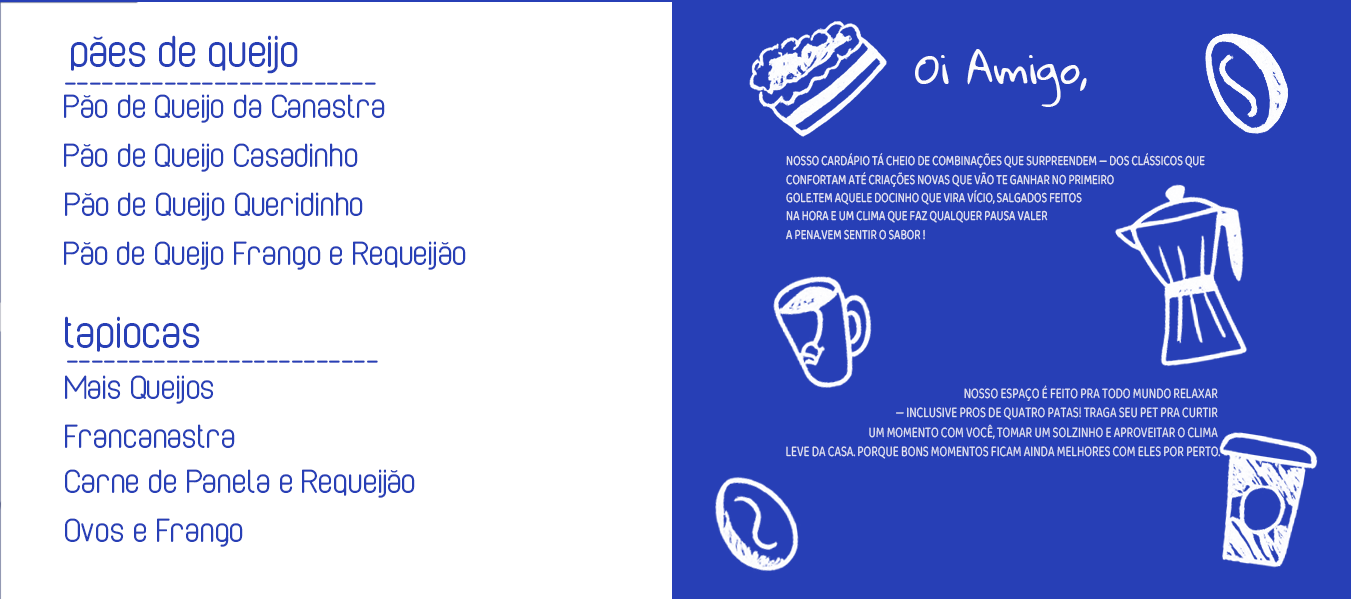
<style>
.page{position:relative;width:1351px;height:599px;background:#ffffff}
.page>*{position:absolute;margin:0}
.t1{font:48px "CaboRoundedRegularRegular";color:#273fb6}
.t2{font:39.7px "GloriaHallelujah";color:#fcfcfc}
.t3{font:36px "CaboRoundedRegularRegular";color:#273fb6}
.t4{font:14.4px "Baloo2-Regular";color:#e4e6f2;text-transform:uppercase;scale:0.74 1}
.t5{font:15.2px "Baloo2-Regular";color:#e4e6f2;text-transform:uppercase;scale:0.74 1}
</style>
<div class="page">
<p class="t1" style="left:71px;top:35px;width:227px;height:39px">pães de queijo</p>
<p class="t2" style="left:915px;top:49px;width:172px;height:58px">Oi Amigo,</p>
<p class="t3" style="left:65px;top:82px;width:311px;height:3px">-------------------------</p>
<p class="t3" style="left:64px;top:94px;width:321px;height:29px">Pão de Queijo da Canastra</p>
<p class="t3" style="left:64px;top:143px;width:294px;height:29px">Pão de Queijo Casadinho</p>
<p class="t4" style="left:786px;top:153px;width:419px;height:87px">Nosso cardápio tá cheio de combinações que surpreendem — dos clássicos que <br>confortam até criações novas que vão te ganhar no primeiro <br>gole.Tem aquele docinho que vira vício, salgados feitos <br>na hora e um clima que faz qualquer pausa valer <br>a pena.Vem sentir o sabor !</p>
<p class="t3" style="left:65px;top:192px;width:298px;height:29px">Pão de Queijo Queridinho</p>
<p class="t3" style="left:64px;top:241px;width:402px;height:29px">Pão de Queijo Frango e Requeijão</p>
<p class="t1" style="left:65px;top:316px;width:135px;height:36px">tapiocas</p>
<p class="t3" style="left:67px;top:360px;width:311px;height:3px">-------------------------</p>
<p class="t3" style="left:65px;top:375px;width:149px;height:29px">Mais Queijos</p>
<p class="t5" style="left:786px;top:385px;width:435px;height:74px;text-align:right">Nosso espaço é feito pra todo mundo relaxar <br>— inclusive pros de quatro patas! Traga seu pet pra curtir <br>um momento com você, tomar um solzinho e aproveitar o clima <br>leve da casa. Porque bons momentos ficam ainda melhores com eles por perto.</p>
<p class="t3" style="left:65px;top:424px;width:170px;height:24px">Francanastra</p>
<p class="t3" style="left:65px;top:469px;width:350px;height:29px">Carne de Panela e Requeijão</p>
<p class="t3" style="left:65px;top:518px;width:178px;height:29px">Ovos e Frango</p>
</div>
